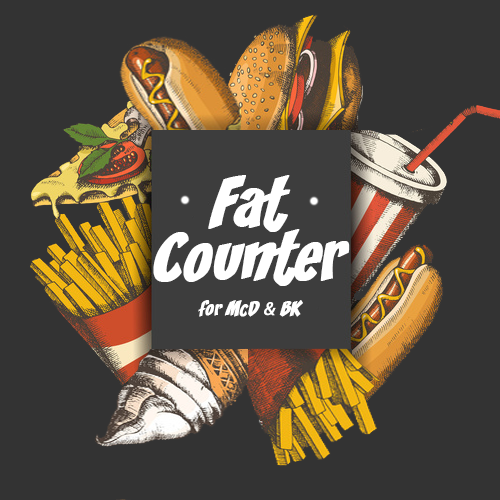
<style>
.page{position:relative;width:500px;height:500px;background:#333333}
.page>*{position:absolute;margin:0}
.t1{font:60px/18px "v_CCZoinks";color:#ffffff;font-weight:bold;font-style:italic}
.t2{font:18px "v_CCZoinks";color:#ffffff;font-weight:bold;font-style:italic}
.t3{font:18px "MyriadPro-Regular";color:#ffffff;font-weight:bold;font-style:italic}
</style>
<div class="page">
<p class="t1" style="left:153px;top:175px;width:197px;height:111px;text-align:center">Fat<br><br><br>Counter</p>
<p class="t2" style="left:198px;top:300px;width:105px;height:17px">for McD <span class="t3">&amp;</span> BK</p>
</div>
